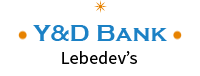
<style>
.page{position:relative;width:200px;height:76px;background:#ffffff}
.page>*{position:absolute;margin:0}
.t1{font:24px "CopperplateGothic-Bold";letter-spacing:0.01em;color:#1c81c5}
.t2{font:18px "SourceSansPro-Regular";letter-spacing:0.01em;color:#000000}
</style>
<div class="page">
<p class="t1" style="left:33px;top:25px;width:134px;height:16px">Y&amp;D Bank</p>
<p class="t2" style="left:62px;top:51px;width:75px;height:13px">Lebedev’s</p>
</div>
